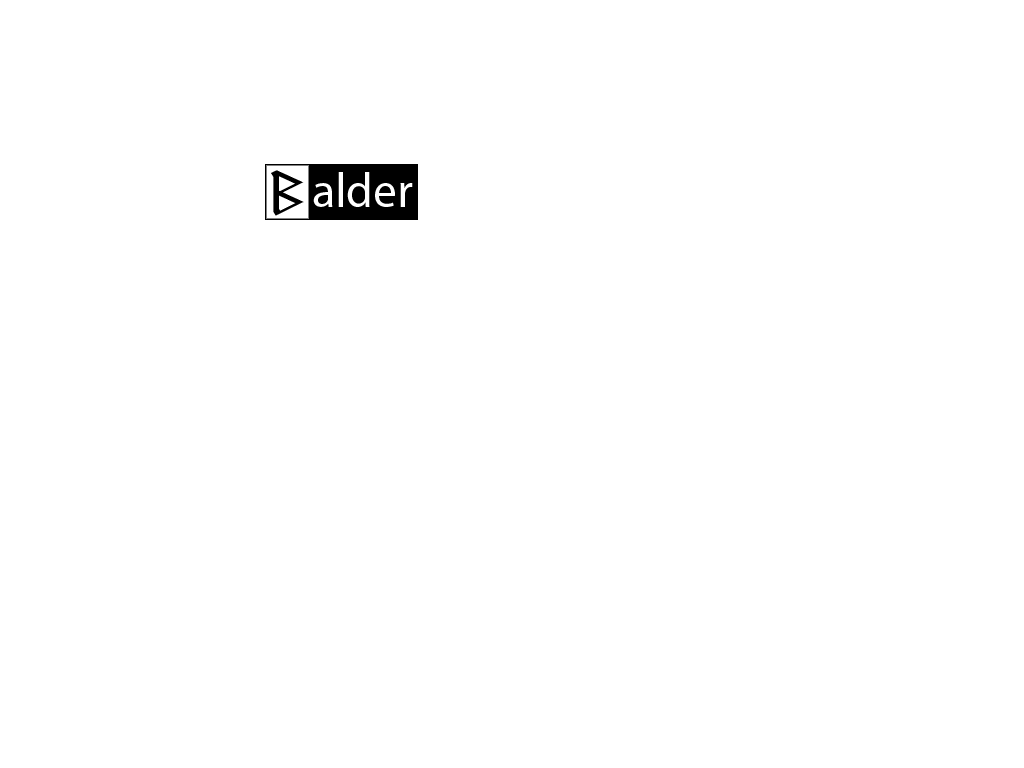
<style>
.page{position:relative;width:1024px;height:768px;background:#ffffff}
.page>*{position:absolute;margin:0}
.t1{font:44px "RUNEnglish1";color:#000000}
.t2{font:48px "MyriadPro-Regular";color:#ffffff}
</style>
<div class="page">
<p class="t1" style="left:271px;top:170px;width:33px;height:46px">B</p>
<p class="t2" style="left:313px;top:172px;width:100px;height:35px">alder</p>
</div>
